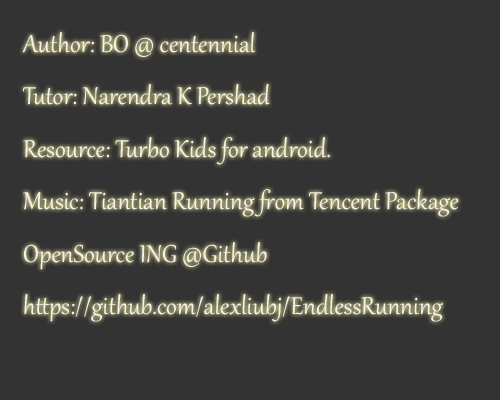
<style>
.page{position:relative;width:500px;height:400px;background:#333333}
.page>*{position:absolute;margin:0}
.t1{font:30px "Gabriola";color:#f7f0f0}
</style>
<div class="page">
<p class="t1" style="left:22px;top:32px;width:437px;height:290px">Author: BO @ centennial<br>Tutor: Narendra K Pershad<br>Resource: Turbo Kids for android.<br>Music: Tiantian Running from Tencent Package<br>OpenSource ING @Github<br>https://github.com/alexliubj/EndlessRunning</p>
</div>
